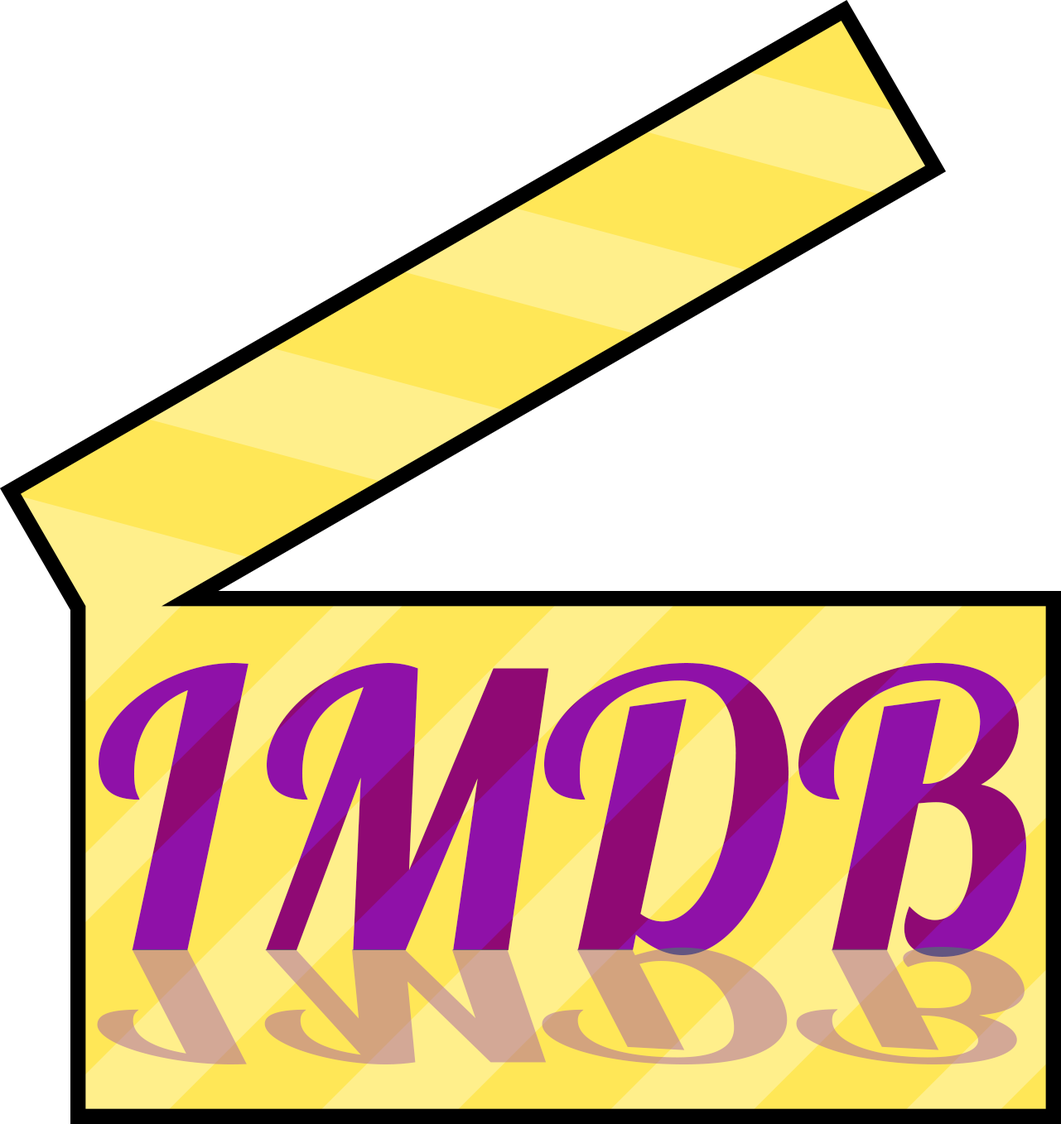
<style>
.page{position:relative;width:1061px;height:1124px;background:#ffffff}
.page>*{position:absolute;margin:0}
.t1{font:383px "Lobster1.4"}
.t2{font:153.3px "Lobster1.4";scale:2.5 1}
</style>
<div class="page">
<p class="t1" style="left:99px;top:663px;width:927px;height:294px">IMDB</p>
<p class="t2" style="left:97px;top:947px;width:927px;height:118px">IMDB</p>
</div>
